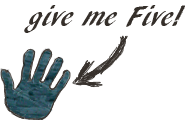
<style>
.page{position:relative;width:190px;height:120px;background:#ffffff}
.page>*{position:absolute;margin:0}
.t1{font:30px "ARBLANCA";color:#352f2a}
</style>
<div class="page">
<p class="t1" style="left:24px;top:5px;width:161px;height:28px">give me Five!</p>
</div>
